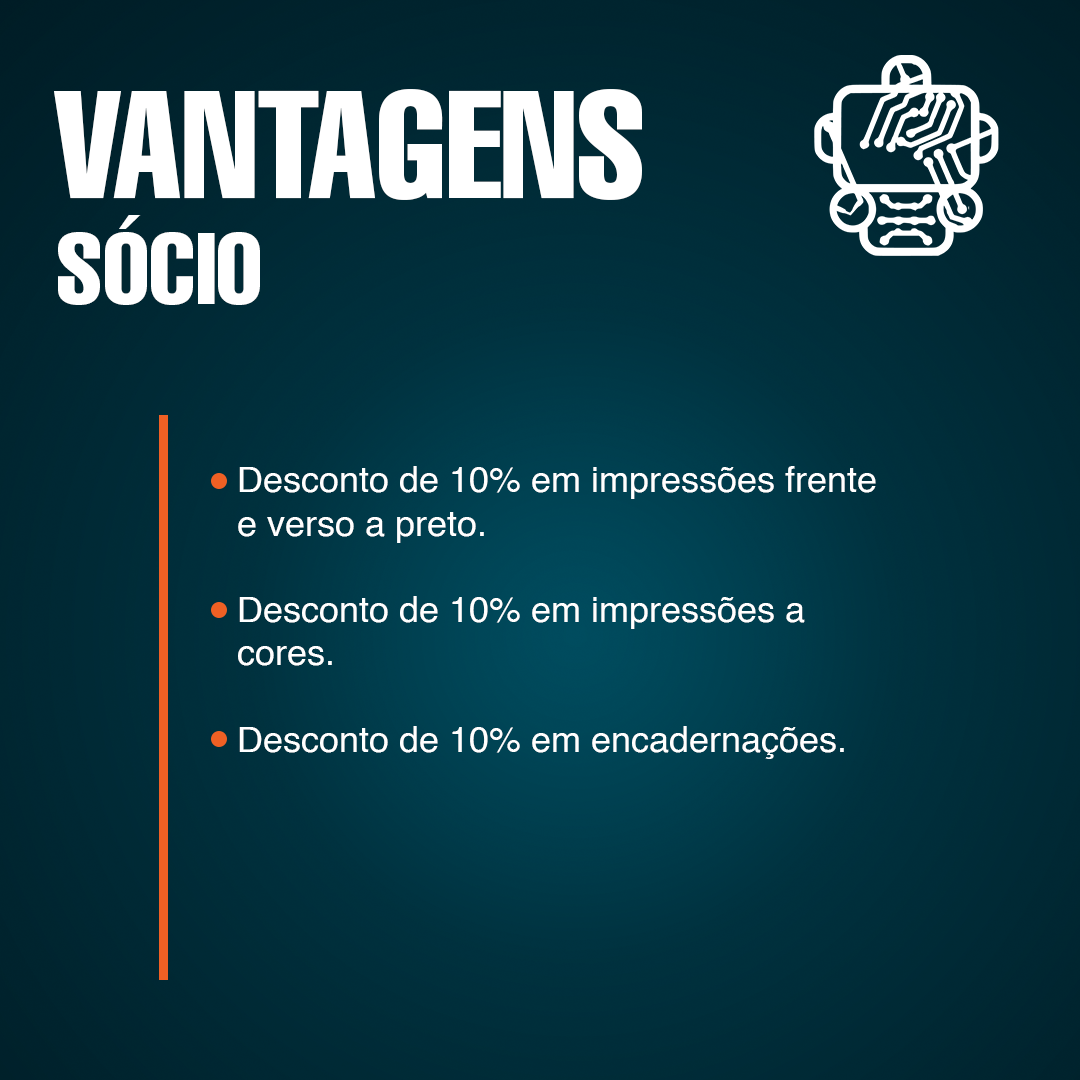
<style>
.page{position:relative;width:1080px;height:1080px}
.page>*{position:absolute;margin:0}
.t1{font:150px "Helvetica-Compressed";color:#ffffff}
.t2{font:100px "Helvetica-Compressed";color:#ffffff}
.t3{font:36px "Helvetica";color:#ffffff}
</style>
<div class="page">
<p class="t1" style="left:54px;top:89px;width:588px;height:111px">VANTAGENS</p>
<p class="t2" style="left:58px;top:215px;width:202px;height:90px">SÓCIO</p>
<p class="t3" style="left:238px;top:466px;width:638px;height:293px">Desconto de 10% em impressões frente e verso a preto.<br><br>Desconto de 10% em impressões a cores.<br><br>Desconto de 10% em encadernações.</p>
</div>
